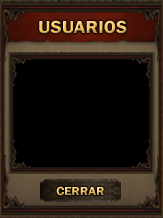
<style>
.page{position:relative;width:163px;height:218px;background:#000000}
.page>*{position:absolute;margin:0}
.t1{font:18px "FranklinGothic-Demi";scale:1.07 1}
.t2{font:12px "FranklinGothic-Demi";scale:1.07 1}
</style>
<div class="page">
<p class="t1" style="left:39px;top:20px;width:88px;height:14px">USUARIOS</p>
<p class="t2" style="left:56px;top:186px;width:48px;height:10px">CERRAR</p>
</div>
